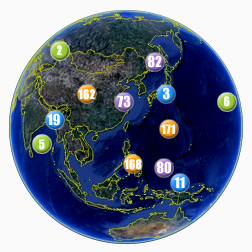
<style>
.page{position:relative;width:252px;height:252px;background:#fafafa}
.page>*{position:absolute;margin:0}
.t1{font:12px "Impact";color:#fafafa}
.t2{font:14px "Impact";color:#fafafa}
</style>
<div class="page">
<p class="t1" style="left:57px;top:45px;width:5px;height:10px">2</p>
<p class="t2" style="left:148px;top:55px;width:14px;height:13px">82</p>
<p class="t1" style="left:78px;top:89px;width:17px;height:11px">162</p>
<p class="t2" style="left:163px;top:87px;width:7px;height:13px">3</p>
<p class="t2" style="left:117px;top:95px;width:14px;height:13px">73</p>
<p class="t1" style="left:224px;top:96px;width:6px;height:11px">6</p>
<p class="t2" style="left:47px;top:113px;width:13px;height:13px">19</p>
<p class="t1" style="left:161px;top:124px;width:14px;height:10px">171</p>
<p class="t1" style="left:39px;top:139px;width:6px;height:11px">5</p>
<p class="t1" style="left:124px;top:159px;width:18px;height:11px">168</p>
<p class="t2" style="left:157px;top:161px;width:14px;height:13px">80</p>
<p class="t2" style="left:174px;top:177px;width:11px;height:11px">11</p>
</div>
